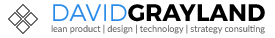
<style>
.page{position:relative;width:275px;height:38px;background:#ffffff}
.page>*{position:absolute;margin:0}
.t1{font:9px "Lato-Regular";color:#595959}
.t2{font:24px "Montserrat-Light";color:#2b8be9}
.t3{font:24px "Montserrat-Bold";color:#000000}
</style>
<div class="page">
<p class="t1" style="left:51px;top:4px;width:214px;height:30px;text-align:center"><span class="t2">DAVID</span><span class="t3">GRAYLAND<br></span>lean product | design | technology | strategy consulting</p>
</div>
